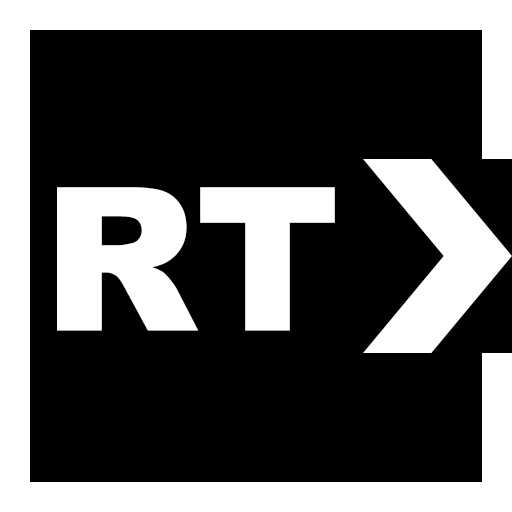
<style>
.page{position:relative;width:512px;height:512px;background:#000000}
.page>*{position:absolute;margin:0}
.t1{font:199.7px "Arial-Black";color:#ffffff}
</style>
<div class="page">
<p class="t1" style="left:57px;top:187px;width:278px;height:144px">RT</p>
</div>
